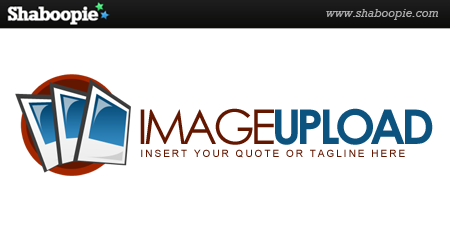
<style>
.page{position:relative;width:450px;height:250px;background:#ffffff}
.page>*{position:absolute;margin:0}
.t1{font:48px "CenturyGothic-Bold";letter-spacing:-0.1em;color:#0c5380}
.t2{font:48px "CenturyGothic";letter-spacing:-0.1em;color:#631700}
.t3{font:10px "ArialMT";letter-spacing:0.2em;color:#631700}
</style>
<div class="page">
<p class="t1" style="left:140px;top:108px;width:293px;height:37px"><span class="t2">IMAGE</span>UPLOAD</p>
<p class="t3" style="left:141px;top:149px;width:264px;height:9px">INSERT YOUR QUOTE OR TAGLINE HERE</p>
</div>
